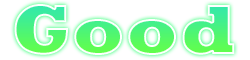
<style>
.page{position:relative;width:250px;height:60px;background:#ffffff}
.page>*{position:absolute;margin:0}
.t1{font:72px "Rockwell-ExtraBold"}
</style>
<div class="page">
<p class="t1" style="left:14px;top:4px;width:221px;height:51px">Good</p>
</div>
